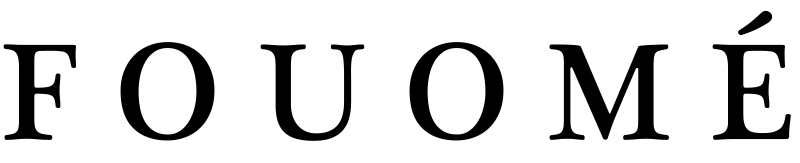
<style>
.page{position:relative;width:800px;height:163px;background:#ffffff}
.page>*{position:absolute;margin:0}
.t1{font:140px "PlantagenetCherokee";color:#000000}
</style>
<div class="page">
<p class="t1" style="left:3px;top:10px;width:788px;height:131px">F O U O M É</p>
</div>
